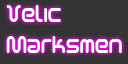
<style>
.page{position:relative;width:128px;height:64px;background:#333333}
.page>*{position:absolute;margin:0}
.t1{font:26px "SciFied2002";color:#ffffff;scale:0.8 1}
</style>
<div class="page">
<p class="t1" style="left:6px;top:5px;width:116px;height:48px">Velic<br>Marksmen</p>
</div>
